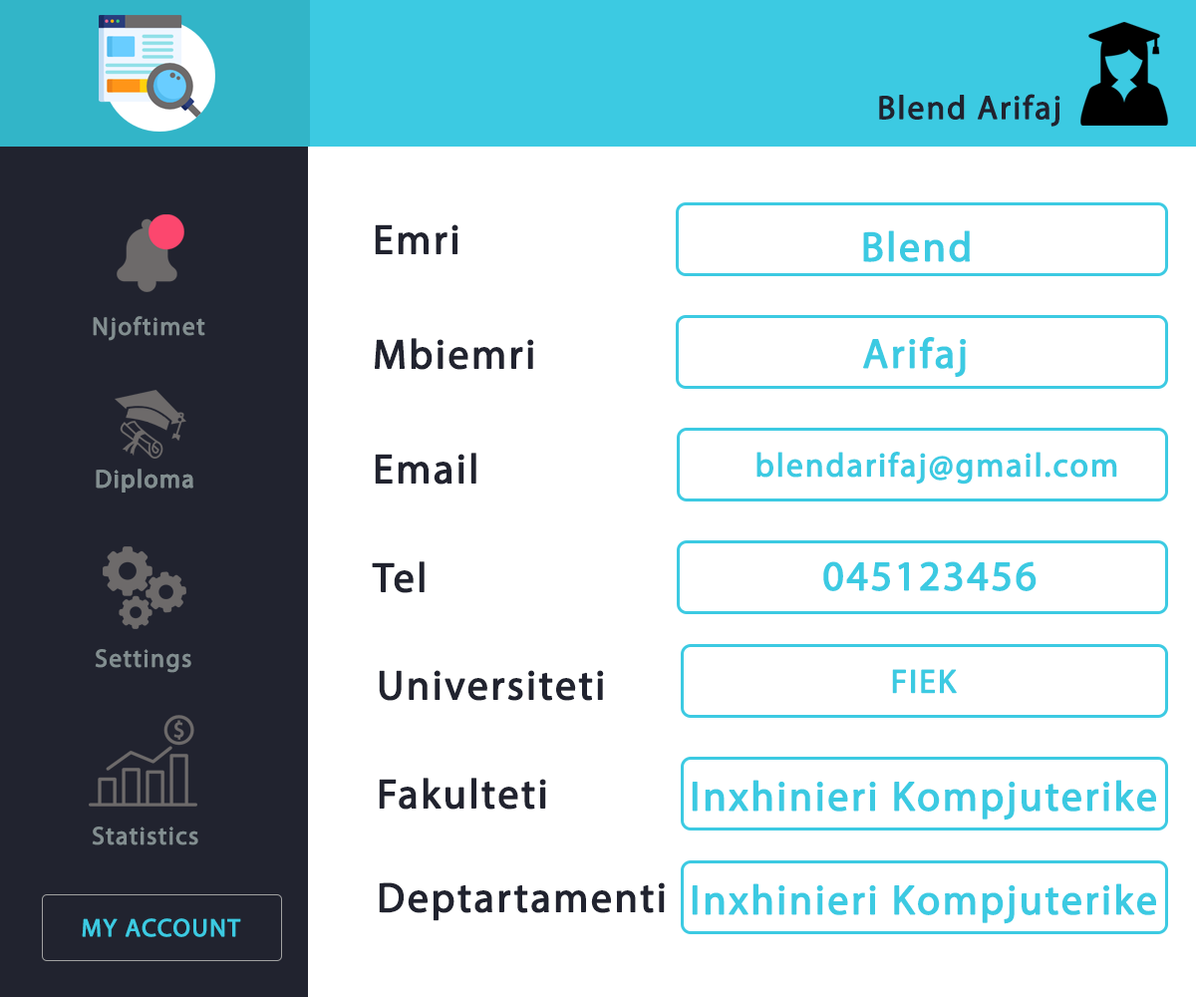
<style>
.page{position:relative;width:1196px;height:997px;background:#ffffff}
.page>*{position:absolute;margin:0}
.t1{font:33.2px "MyriadPro-Regular";letter-spacing:0.04em;color:#21232f;font-weight:bold}
.t2{font:41.5px "MyriadPro-Regular";letter-spacing:0.04em;color:#21232f;font-weight:bold}
.t3{font:41.5px "MyriadPro-Regular";letter-spacing:0.04em;color:#3ccae2;font-weight:bold}
.t4{font:24.9px "MyriadPro-Regular";letter-spacing:0.04em;color:#828e90;font-weight:bold}
.t5{font:33.2px "MyriadPro-Regular";letter-spacing:0.04em;color:#3ccae2;font-weight:bold}
.t6{font:24.9px "MyriadPro-Regular";letter-spacing:0.04em;color:#3ccae2;font-weight:bold}
</style>
<div class="page">
<p class="t1" style="left:879px;top:94px;width:182px;height:33px">Blend Arifaj</p>
<p class="t2" style="left:375px;top:224px;width:84px;height:30px">Emri</p>
<p class="t3" style="left:863px;top:230px;width:107px;height:32px">Blend</p>
<p class="t4" style="left:93px;top:316px;width:112px;height:25px">Njoftimet</p>
<p class="t2" style="left:375px;top:338px;width:159px;height:32px">Mbiemri</p>
<p class="t3" style="left:863px;top:337px;width:103px;height:40px">Arifaj</p>
<p class="t2" style="left:375px;top:453px;width:101px;height:31px">Email</p>
<p class="t5" style="left:757px;top:452px;width:360px;height:32px">blendarifaj@gmail.com</p>
<p class="t4" style="left:96px;top:469px;width:97px;height:23px">Diploma</p>
<p class="t4" style="left:96px;top:469px;width:97px;height:23px">Diploma</p>
<p class="t2" style="left:372px;top:561px;width:53px;height:32px">Tel</p>
<p class="t3" style="left:823px;top:561px;width:214px;height:30px">045123456</p>
<p class="t4" style="left:95px;top:649px;width:96px;height:24px">Settings</p>
<p class="t2" style="left:379px;top:670px;width:225px;height:31px">Universiteti</p>
<p class="t5" style="left:892px;top:669px;width:65px;height:25px">FIEK</p>
<p class="t2" style="left:379px;top:778px;width:167px;height:31px">Fakulteti</p>
<p class="t3" style="left:692px;top:780px;width:464px;height:40px">Inxhinieri Kompjuterike</p>
<p class="t4" style="left:92px;top:826px;width:106px;height:19px">Statistics</p>
<p class="t2" style="left:379px;top:882px;width:286px;height:39px">Deptartamenti</p>
<p class="t3" style="left:692px;top:883px;width:464px;height:41px">Inxhinieri Kompjuterike</p>
<p class="t6" style="left:82px;top:918px;width:159px;height:19px">MY ACCOUNT</p>
</div>
